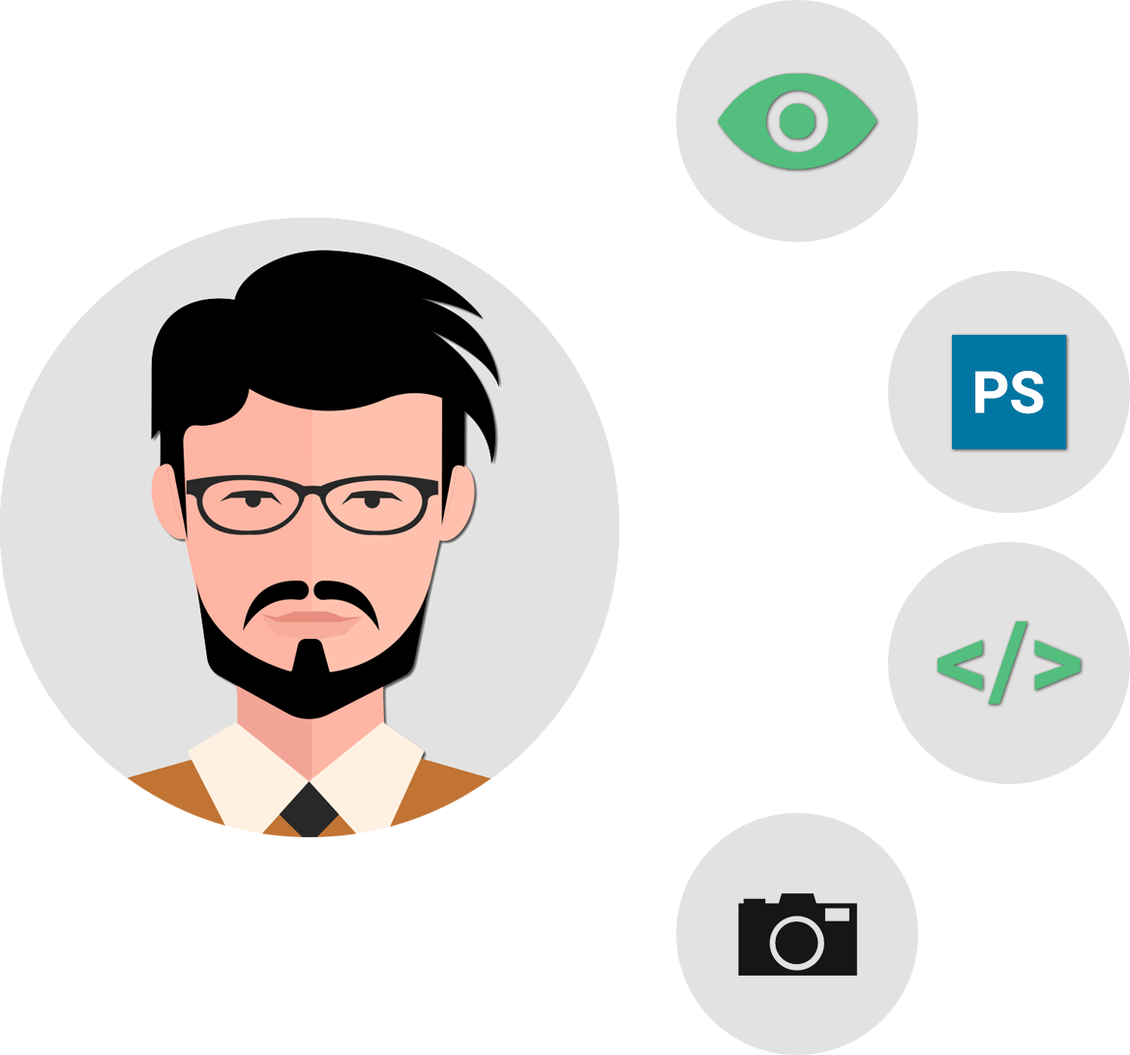
<style>
.page{position:relative;width:1130px;height:1055px;background:#ffffff}
.page>*{position:absolute;margin:0}
.t1{font:58.1px "Roboto-Bold";color:#ffffff}
.t2{font:106.5px "Roboto-Bold";color:#53be7e}
</style>
<div class="page">
<p class="t1" style="left:976px;top:371px;width:68px;height:43px">PS</p>
<p class="t2" style="left:938px;top:621px;width:143px;height:84px">&lt;/&gt;</p>
</div>
